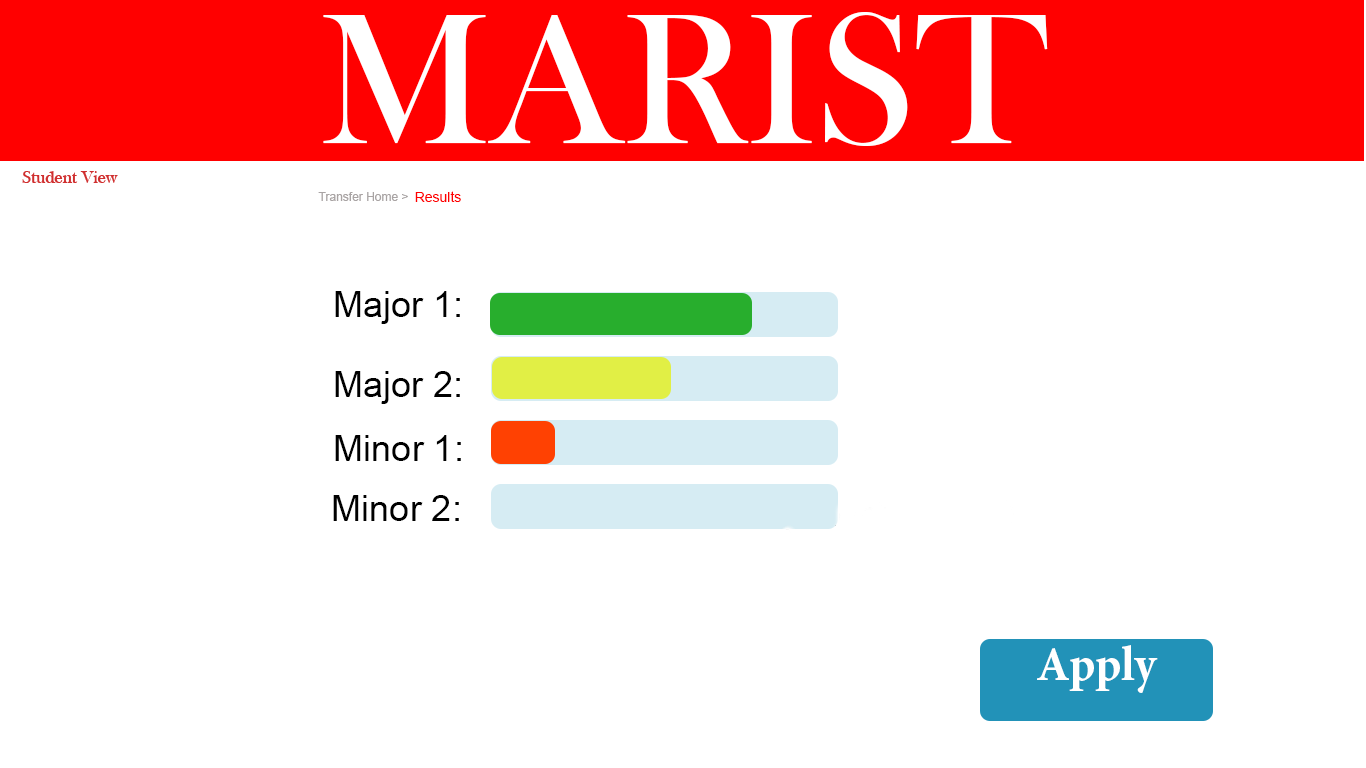
<style>
.page{position:relative;width:1366px;height:768px;background:#ffffff}
.page>*{position:absolute;margin:0}
.t1{font:14px "ArialMT";color:#ff0000}
.t2{font:36px "ArialMT";color:#000000}
.t3{font:48px "MinionPro-Bold";color:#ffffff}
</style>
<div class="page">
<p class="t1" style="left:415px;top:191px;width:46px;height:11px">Results</p>
<p class="t2" style="left:335px;top:291px;width:125px;height:33px">Major 1:</p>
<p class="t2" style="left:335px;top:371px;width:125px;height:33px">Major 2:</p>
<p class="t2" style="left:335px;top:435px;width:126px;height:26px">Minor 1:</p>
<p class="t2" style="left:333px;top:495px;width:126px;height:26px">Minor 2:</p>
<p class="t3" style="left:1037px;top:645px;width:121px;height:48px">Apply</p>
</div>
